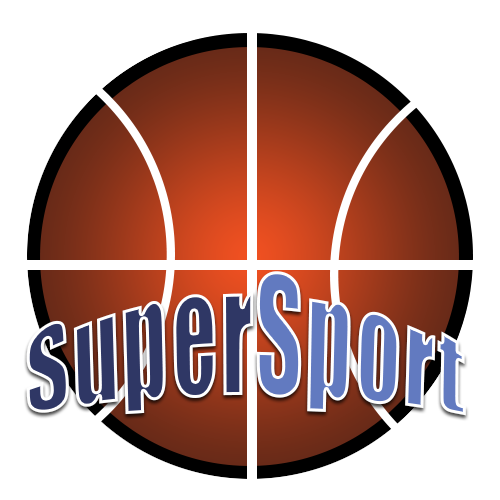
<style>
.page{position:relative;width:500px;height:500px;background:#ffffff}
.page>*{position:absolute;margin:0}
.t1{font:94.5px "Impact";color:#2f3765}
.t2{font:94.5px "Impact";color:#627ac0}
</style>
<div class="page">
<p class="t1" style="left:26px;top:271px;width:440px;height:145px">Super<span class="t2">Sport</span></p>
</div>
